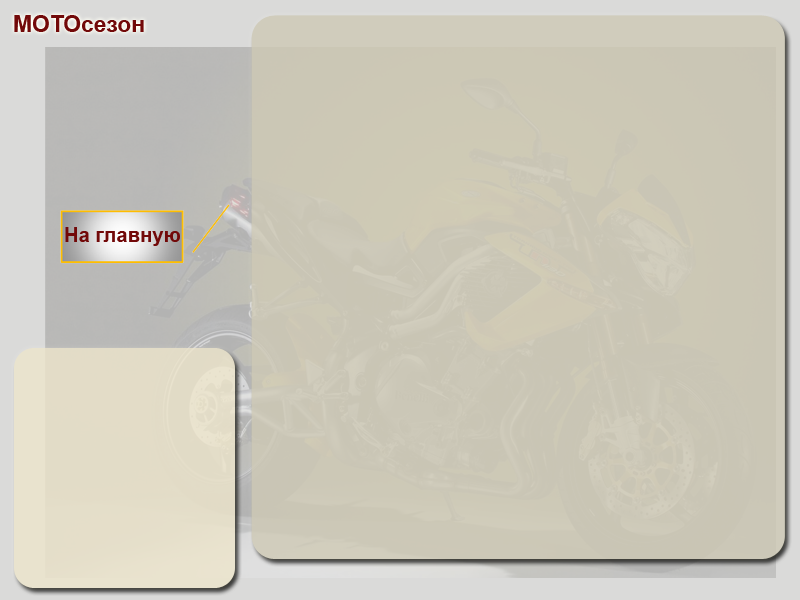
<style>
.page{position:relative;width:800px;height:600px}
.page>*{position:absolute;margin:0}
.t1{font:22.9px "Arial-BoldMT";color:#720909}
.t2{font:20.3px "Arial-BoldMT";color:#720909}
</style>
<div class="page">
<p class="t1" style="left:14px;top:15px;width:130px;height:17px">МОТОсезон</p>
<p class="t2" style="left:65px;top:227px;width:115px;height:19px">На главную</p>
</div>
